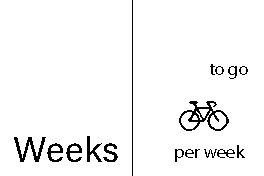
<style>
.page{position:relative;width:264px;height:176px;background:#ffffff}
.page>*{position:absolute;margin:0}
.t1{font:18px "MyriadPro-Regular";color:#000000}
</style>
<div class="page">
<p class="t1" style="left:210px;top:64px;width:38px;height:15px">to go</p>
<p class="t1" style="left:175px;top:145px;width:70px;height:17px">per week</p>
</div>
